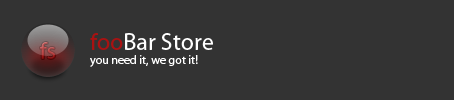
<style>
.page{position:relative;width:454px;height:100px;background:#333333}
.page>*{position:absolute;margin:0}
.t1{font:12px "MyriadPro-Regular";color:#ffffff}
.t2{font:24px "MyriadPro-Regular";color:#aa1111}
.t3{font:24px "MyriadPro-Regular";color:#ffffff}
.t4{font:24px "MyriadPro-Regular"}
</style>
<div class="page">
<p class="t1" style="left:90px;top:33px;width:123px;height:34px"><span class="t2">foo</span><span class="t3">Bar Store<br></span>you need it, we got it!</p>
<p class="t4" style="left:40px;top:42px;width:16px;height:17px">fs</p>
</div>
